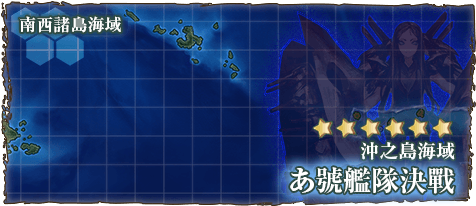
<style>
.page{position:relative;width:476px;height:206px}
.page>*{position:absolute;margin:0}
.t1{font:17px "RyuminPr6N-ExBold";color:#ffffff}
.t2{font:19px "RyuminPro-ExBold";color:#ffffff}
.t3{font:28px "RyuminPro-ExBold";color:#ffffff}
</style>
<div class="page">
<p class="t1" style="left:19px;top:16px;width:102px;height:17px">南西諸島海域</p>
<p class="t2" style="left:361px;top:142px;width:94px;height:18px">沖之島海域</p>
<p class="t3" style="left:290px;top:167px;width:165px;height:27px">あ號艦隊決戰</p>
</div>
